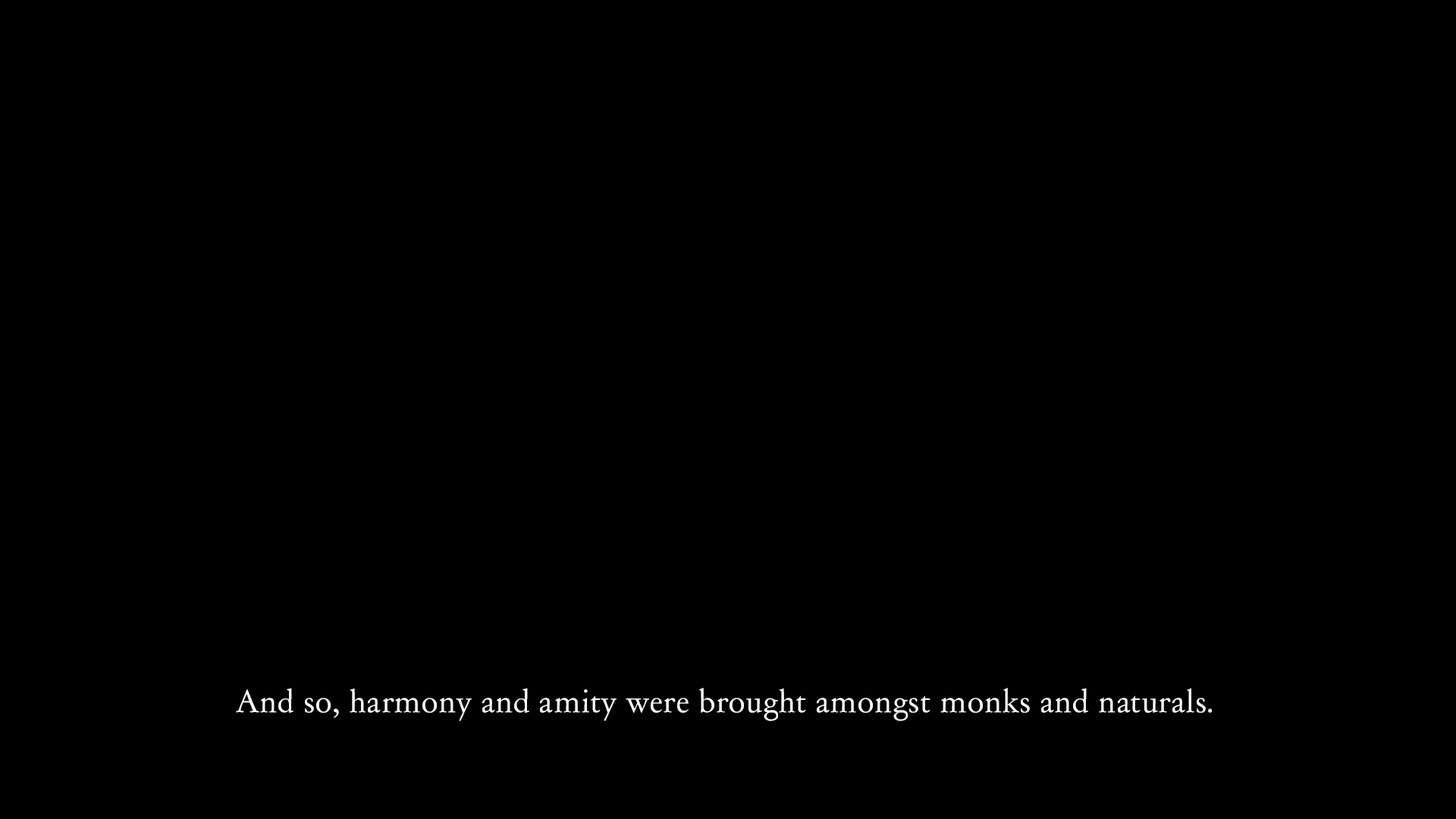
<style>
.page{position:relative;width:1456px;height:819px;background:#000000}
.page>*{position:absolute;margin:0}
.t1{font:30.3px "DayRoman";color:#ffffff}
</style>
<div class="page">
<p class="t1" style="left:236px;top:688px;width:976px;height:33px">And so, harmony and amity were brought amongst monks and naturals.</p>
</div>
